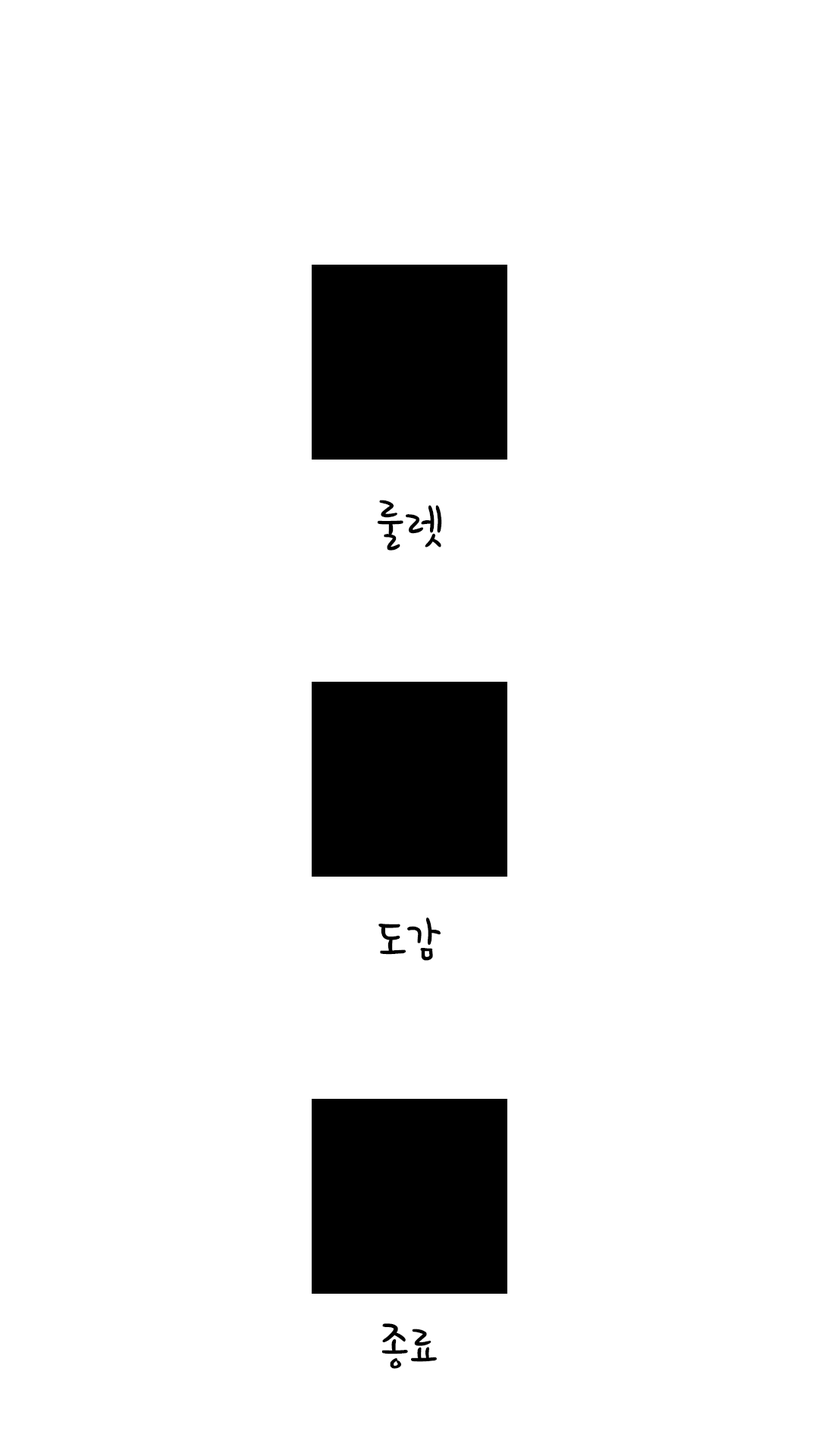
<style>
.page{position:relative;width:819px;height:1456px;background:#ffffff}
.page>*{position:absolute;margin:0}
.t1{font:56.9px "HoonWcatR";color:#000000}
</style>
<div class="page">
<p class="t1" style="left:377px;top:500px;width:65px;height:51px">룰렛</p>
<p class="t1" style="left:378px;top:918px;width:63px;height:43px">도감</p>
<p class="t1" style="left:381px;top:1323px;width:56px;height:46px">종료</p>
</div>
